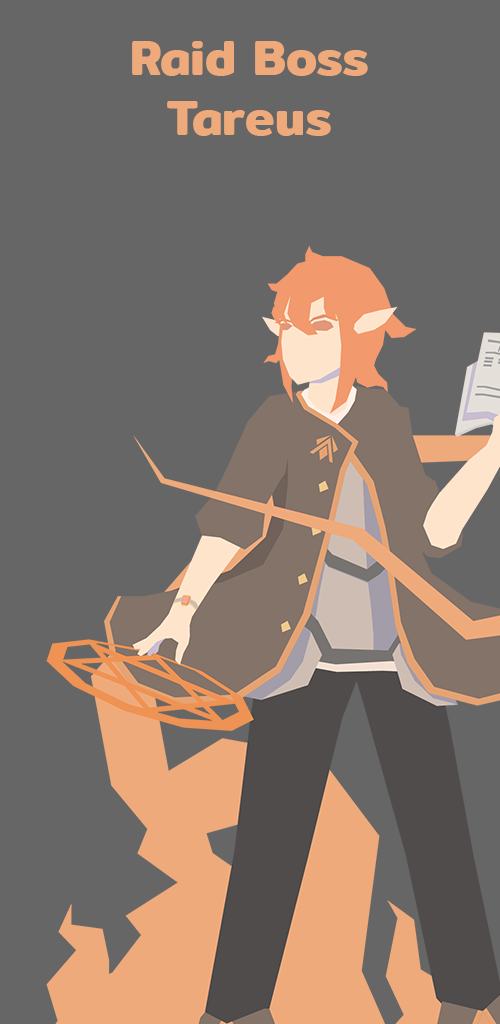
<style>
.page{position:relative;width:500px;height:1024px;background:#666666}
.page>*{position:absolute;margin:0}
.t1{font:50px "Mitr-SemiBold";color:#efaa7b}
</style>
<div class="page">
<p class="t1" style="left:132px;top:41px;width:236px;height:95px;text-align:center">Raid Boss<br>Tareus</p>
</div>
